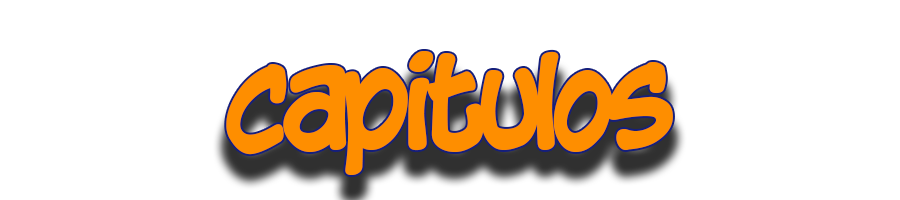
<style>
.page{position:relative;width:900px;height:200px;background:#ffffff}
.page>*{position:absolute;margin:0}
.t1{font:123px "BlambotCasualBold";letter-spacing:-0.12em;color:#fe8e00}
</style>
<div class="page">
<p class="t1" style="left:226px;top:51px;width:447px;height:124px">capitulos</p>
</div>
